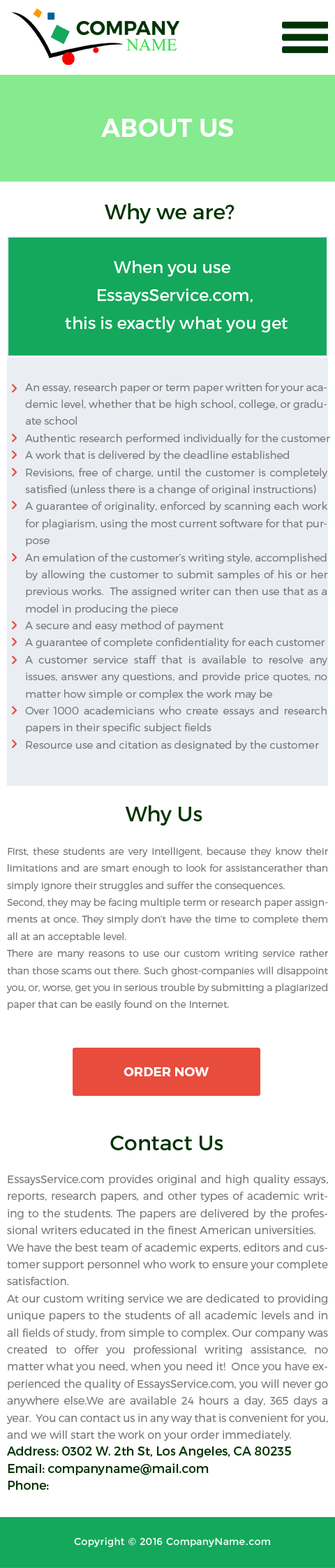
<style>
.page{position:relative;width:335px;height:1568px;background:#ffffff}
.page>*{position:absolute;margin:0}
.t1{font:25.1px "Montserrat-SemiBold";color:#ffffff;text-transform:uppercase}
.t2{font:21px "Montserrat-Regular";color:#003300}
.t3{font:16.8px/27.9px "Montserrat-Regular";color:#ffffff}
.t4{font:10.5px/17px "Montserrat-Light";color:#777777}
.t5{font:9.8px/17px "Montserrat-Light";color:#777777}
.t6{font:12.9px "Montserrat-Bold";color:#ffffff;text-transform:uppercase}
.t7{font:10.9px/17px "Montserrat-Light";color:#777777}
.t8{font:12.3px/17px "Montserrat-Regular";color:#003300}
.t9{font:9.8px "Montserrat-Regular";letter-spacing:0.025em;color:#ffffff}
</style>
<div class="page">
<p class="t1" style="left:101px;top:119px;width:132px;height:18px">About us</p>
<p class="t2" style="left:105px;top:203px;width:130px;height:21px">Why we are?</p>
<p class="t3" style="left:65px;top:261px;width:223px;height:71px;text-align:center">When you use <br>EssaysService.com,<br> this is exactly what you get</p>
<p class="t4" style="left:25px;top:383px;width:305px;height:368px;text-align:justify">An essay, research paper or term paper written for your academic level, whether that be high school, college, or graduate school<br>Authentic research performed individually for the customer<br>A work that is delivered by the deadline established<br>Revisions, free of charge, until the customer is completely satisfied (unless there is a change of original instructions)<br>A guarantee of originality, enforced by scanning each work for plagiarism, using the most current software for that purpose<br>An emulation of the customer’s writing style, accomplished by allowing the customer to submit samples of his or her previous works.  The assigned writer can then use that as a model in producing the piece<br>A secure and easy method of payment<br>A guarantee of complete confidentiality for each customer<br>A customer service staff that is available to resolve any issues, answer any questions, and provide price quotes, no matter how simple or complex the work may be<br>Over 1000 academicians who create essays and research papers in their specific subject fields<br>Resource use and citation as designated by the customer</p>
<p class="t2" style="left:125px;top:805px;width:78px;height:21px">Why Us</p>
<p class="t5" style="left:6px;top:847px;width:322px;height:163px;text-align:justify">First, these students are very intelligent, because they know their limitations and are smart enough to look for assistancerather than simply ignore their struggles and suffer the consequences.<br>Second, they may be facing multiple term or research paper assignments at once. They simply don’t have the time to complete them all at an acceptable level.<br>There are many reasons to use our custom writing service rather than those scams out there. Such ghost-companies will disappoint you, or, worse, get you in serious trouble by submitting a plagiarized paper that can be easily found on the Internet.</p>
<p class="t6" style="left:124px;top:1067px;width:86px;height:9px">Order NOW</p>
<p class="t2" style="left:110px;top:1136px;width:114px;height:14px">Contact Us</p>
<p class="t7" style="left:6px;top:1175px;width:322px;height:315px;text-align:justify">EssaysService.com provides original and high quality essays, reports, research papers, and other types of academic writing to the students. The papers are delivered by the professional writers educated in the finest American universities.<br>We have the best team of academic experts, editors and customer support personnel who work to ensure your complete satisfaction.<br>At our custom writing service we are dedicated to providing unique papers to the students of all academic levels and in all fields of study, from simple to complex. Our company was created to offer you professional writing assistance, no matter what you need, when you need it!  Once you have experienced the quality of EssaysService.com, you will never go anywhere else.We are available 24 hours a day, 365 days a year.  You can contact us in any way that is convenient for you, and we will start the work on your order immediately.<br><span class="t8">Address: 0302 W. 2th St, Los Angeles, CA 80235<br>Email: companyname@mail.com<br>Phone:</span></p>
<p class="t9" style="left:74px;top:1537px;width:197px;height:11px">Copyright © 2016 CompanyName.com</p>
</div>
